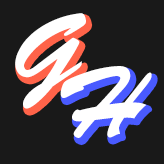
<style>
.page{position:relative;width:164px;height:164px;background:#191919}
.page>*{position:absolute;margin:0}
.t1{font:100px "BrushScriptStd";color:#ffffff}
</style>
<div class="page">
<p class="t1" style="left:15px;top:13px;width:71px;height:96px">G</p>
<p class="t1" style="left:60px;top:66px;width:92px;height:72px">H</p>
</div>
